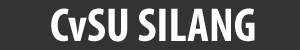
<style>
.page{position:relative;width:300px;height:50px;background:#333333}
.page>*{position:absolute;margin:0}
.t1{font:48px "MyriadPro-BoldCond";color:#fefefe}
</style>
<div class="page">
<p class="t1" style="left:51px;top:8px;width:204px;height:34px">CvSU SILANG</p>
</div>
